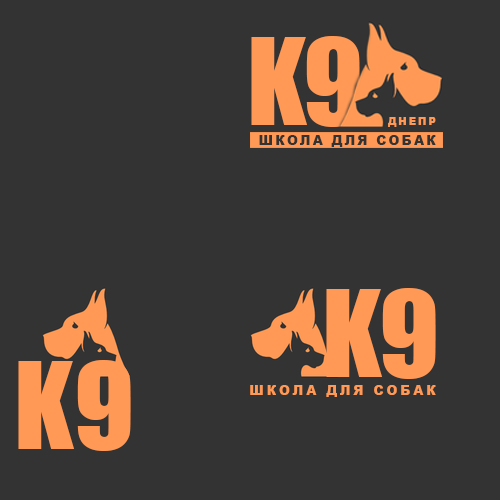
<style>
.page{position:relative;width:500px;height:500px;background:#333333}
.page>*{position:absolute;margin:0}
.t1{font:110.8px "Impact";letter-spacing:-0.04em;color:#ff9955}
.t2{font:10.6px "Arial-Black";letter-spacing:0.2em;color:#ff9955;text-transform:uppercase;scale:0.95 1}
.t3{font:14px "Arial-Black";letter-spacing:0.15em;color:#333333;text-transform:uppercase;scale:0.95 1}
.t4{font:110.8px "Impact";letter-spacing:-0.025em;color:#ff9955}
.t5{font:110.8px "Impact";color:#ff9955}
.t6{font:14px "Arial-Black";letter-spacing:0.2em;color:#ff9955;text-transform:uppercase;scale:0.95 1}
</style>
<div class="page">
<p class="t1" style="left:251px;top:36px;width:109px;height:91px">K9</p>
<p class="t2" style="left:388px;top:117px;width:48px;height:10px">ДНЕПР</p>
<p class="t3" style="left:259px;top:135px;width:177px;height:12px">Школа для собак</p>
<p class="t4" style="left:326px;top:288px;width:110px;height:91px">K9</p>
<p class="t5" style="left:18px;top:360px;width:113px;height:91px">K9</p>
<p class="t6" style="left:250px;top:385px;width:186px;height:12px">Школа для собак</p>
</div>
